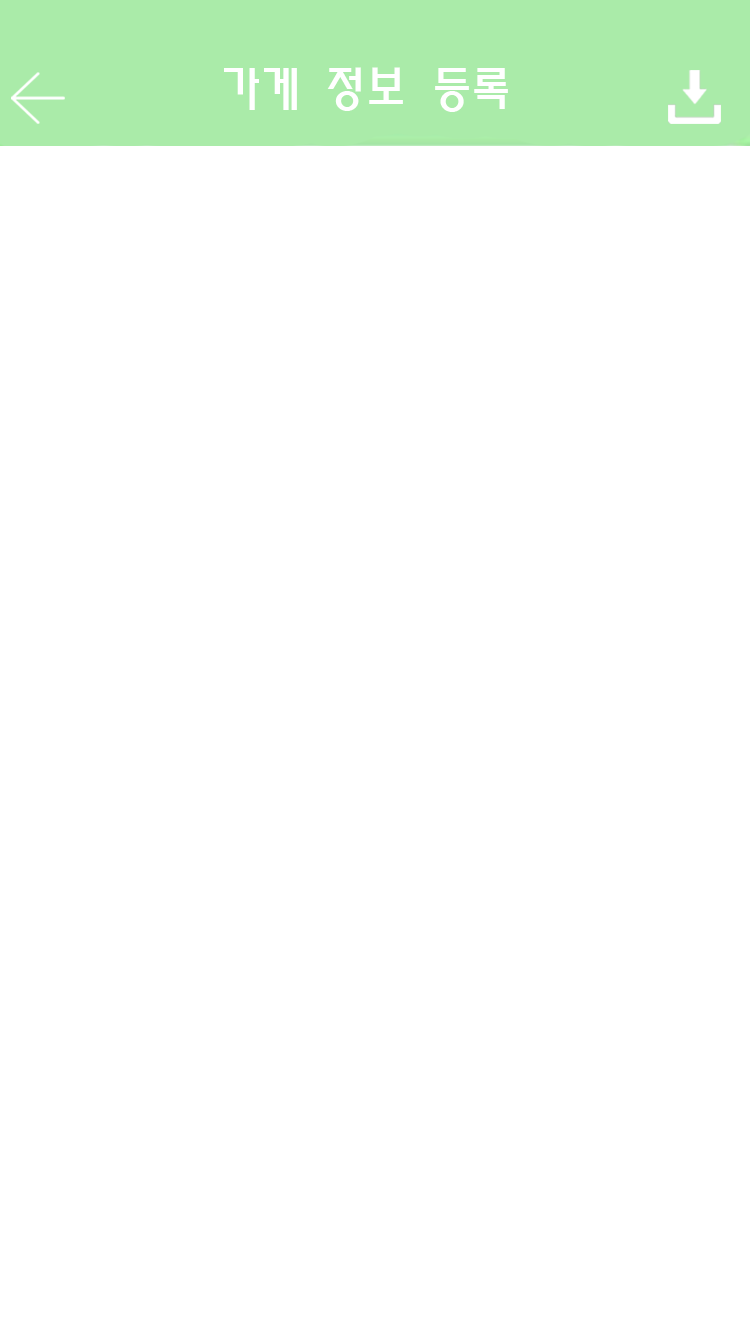
<style>
.page{position:relative;width:750px;height:1334px;background:#ffffff}
.page>*{position:absolute;margin:0}
.t1{font:48px "MoeumTR-HM";color:#ffffff}
</style>
<div class="page">
<p class="t1" style="left:224px;top:67px;width:284px;height:45px">가게 정보 등록</p>
</div>
